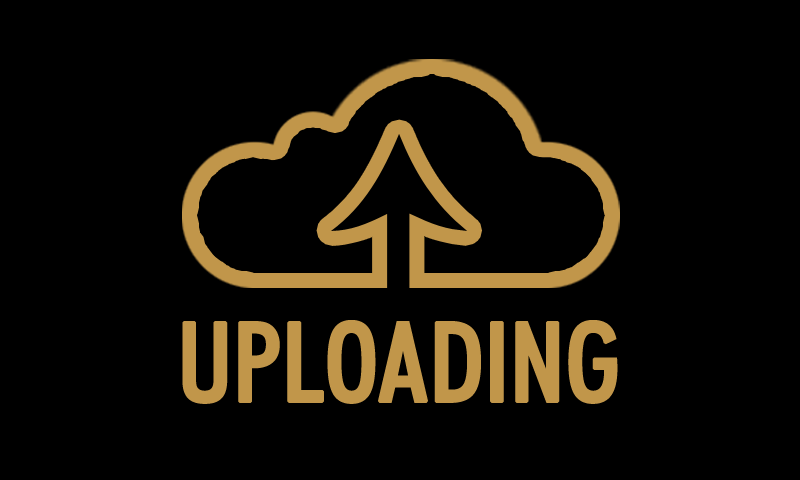
<style>
.page{position:relative;width:800px;height:480px;background:#000000}
.page>*{position:absolute;margin:0}
.t1{font:110.5px "FuturaBT-MediumCondensed";color:#c1964a;font-weight:bold}
</style>
<div class="page">
<p class="t1" style="left:182px;top:320px;width:436px;height:84px">UPLOADING</p>
</div>
